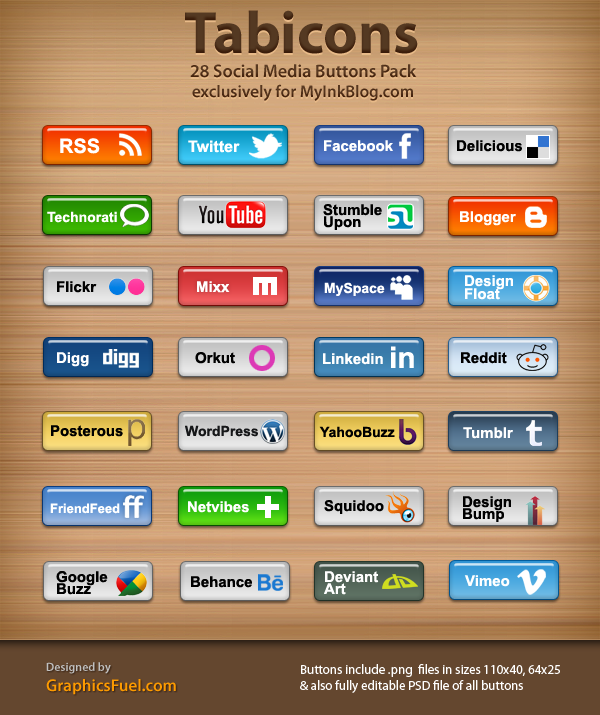
<style>
.page{position:relative;width:600px;height:715px}
.page>*{position:absolute;margin:0}
.t1{font:60px "MyriadPro-Bold";color:#64472f}
.t2{font:17px "MyriadPro-Semibold";color:#64472f}
.t3{font:18px "MyriadPro-Semibold";color:#64472f}
.t4{font:20px "Arial-BoldMT";color:#ffffff}
.t5{font:16px "Arial-BoldMT";color:#ffffff}
.t6{font:15px "Arial-BoldMT";color:#ffffff}
.t7{font:15px "Arial-BoldMT";color:#000000}
.t8{font:15px/12px "Arial-BoldMT";color:#000000}
.t9{font:14px "Arial-BoldMT";color:#ffffff}
.t10{font:15px/13px "Arial-BoldMT";color:#ffffff}
.t11{font:30px "Arial-BoldMT";color:#ffffff}
.t12{font:14px "Arial-BoldMT";color:#161719}
.t13{font:14px "Arial-BoldMT";color:#000000}
.t14{font:13px "Arial-BoldMT";color:#ffffff}
.t15{font:15px/12px "Arial-BoldMT";color:#fefefe}
.t16{font:17px "MyriadPro-Semibold";color:#fc9a00}
.t17{font:12px "MyriadPro-Semibold";color:#c0c0c0}
.t18{font:13px "MyriadPro-Regular";color:#ffffff}
</style>
<div class="page">
<p class="t1" style="left:185px;top:10px;width:233px;height:44px">Tabicons</p>
<p class="t2" style="left:190px;top:64px;width:227px;height:37px;text-align:center"><span class="t3">28 Social Media Buttons Pack<br></span>exclusively for MyInkBlog.com</p>
<p class="t4" style="left:60px;top:138px;width:40px;height:16px">RSS</p>
<p class="t5" style="left:188px;top:140px;width:52px;height:13px">Twitter</p>
<p class="t6" style="left:324px;top:140px;width:69px;height:12px">Facebook</p>
<p class="t7" style="left:457px;top:140px;width:65px;height:12px">Delicious</p>
<p class="t8" style="left:323px;top:204px;width:59px;height:26px">Stumble<br>Upon</p>
<p class="t9" style="left:47px;top:211px;width:70px;height:12px">Technorati</p>
<p class="t6" style="left:460px;top:211px;width:56px;height:15px">Blogger</p>
<p class="t7" style="left:57px;top:281px;width:40px;height:12px">Flickr</p>
<p class="t6" style="left:197px;top:281px;width:33px;height:12px">Mixx</p>
<p class="t10" style="left:465px;top:275px;width:48px;height:25px">Design<br>Float</p>
<p class="t9" style="left:324px;top:282px;width:61px;height:14px">MySpace</p>
<p class="t6" style="left:57px;top:352px;width:32px;height:15px">Digg</p>
<p class="t7" style="left:195px;top:352px;width:40px;height:12px">Orkut</p>
<p class="t6" style="left:323px;top:353px;width:60px;height:12px">Linkedin</p>
<p class="t11" style="left:391px;top:346px;width:23px;height:22px">in</p>
<p class="t7" style="left:461px;top:352px;width:46px;height:12px">Reddit</p>
<p class="t7" style="left:51px;top:425px;width:72px;height:12px">Posterous</p>
<p class="t12" style="left:185px;top:425px;width:73px;height:12px">WordPress</p>
<p class="t13" style="left:319px;top:426px;width:76px;height:12px">YahooBuzz</p>
<p class="t6" style="left:463px;top:427px;width:50px;height:12px">Tumblr</p>
<p class="t8" style="left:463px;top:496px;width:48px;height:26px">Design<br>Bump</p>
<p class="t14" style="left:50px;top:503px;width:70px;height:11px">FriendFeed</p>
<p class="t6" style="left:188px;top:501px;width:61px;height:12px">Netvibes</p>
<p class="t7" style="left:324px;top:500px;width:60px;height:14px">Squidoo</p>
<p class="t8" style="left:56px;top:571px;width:52px;height:24px">Google<br>Buzz</p>
<p class="t7" style="left:191px;top:576px;width:61px;height:12px">Behance</p>
<p class="t15" style="left:324px;top:571px;width:55px;height:24px">Deviant<br>Art</p>
<p class="t6" style="left:464px;top:575px;width:46px;height:12px">Vimeo</p>
<p class="t16" style="left:46px;top:662px;width:130px;height:33px"><span class="t17">Designed by <br></span>GraphicsFuel.com</p>
<p class="t18" style="left:300px;top:664px;width:260px;height:29px">Buttons include .png  files in sizes 110x40, 64x25 <br>&amp; also fully editable PSD file of all buttons</p>
</div>
